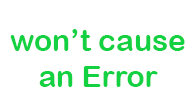
<style>
.page{position:relative;width:195px;height:108px;background:#ffffff}
.page>*{position:absolute;margin:0}
.t1{font:30px "ArialRoundedMTBold";color:#14d141}
</style>
<div class="page">
<p class="t1" style="left:10px;top:29px;width:175px;height:58px;text-align:center">won’t cause<br>an Error</p>
</div>
